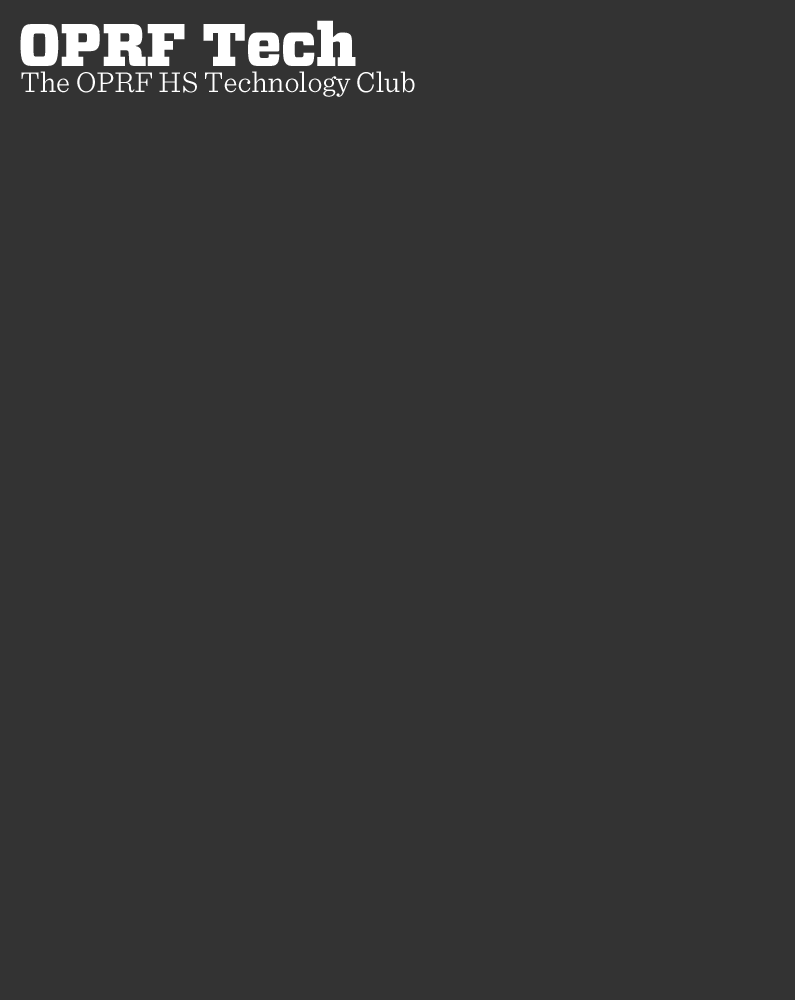
<style>
.page{position:relative;width:795px;height:1000px;background:#333333}
.page>*{position:absolute;margin:0}
.t1{font:60px "Vitesse-Black";color:#ffffff}
.t2{font:30px "Sentinel-Light";color:#ffffff}
</style>
<div class="page">
<p class="t1" style="left:20px;top:20px;width:336px;height:46px">OPRF Tech</p>
<p class="t2" style="left:21px;top:71px;width:394px;height:26px">The OPRF HS Technology Club</p>
</div>
